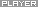
<style>
.page{position:relative;width:38px;height:7px;background:#999999}
.page>*{position:absolute;margin:0}
.t1{font:8px "5x5-Pixel";color:#ffffff}
</style>
<div class="page">
<p class="t1" style="left:2px;top:1px;width:34px;height:5px">player</p>
</div>
